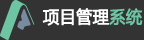
<style>
.page{position:relative;width:144px;height:40px;background:#333333}
.page>*{position:absolute;margin:0}
.t1{font:17px "MicrosoftYaHei";color:#ffffff;font-weight:bold;scale:0.95 1}
.t2{font:17px "MicrosoftYaHei";color:#6dc5a3;font-weight:bold;scale:0.95 1}
</style>
<div class="page">
<p class="t1" style="left:42px;top:8px;width:101px;height:18px">项目管理<span class="t2">系统</span></p>
</div>
